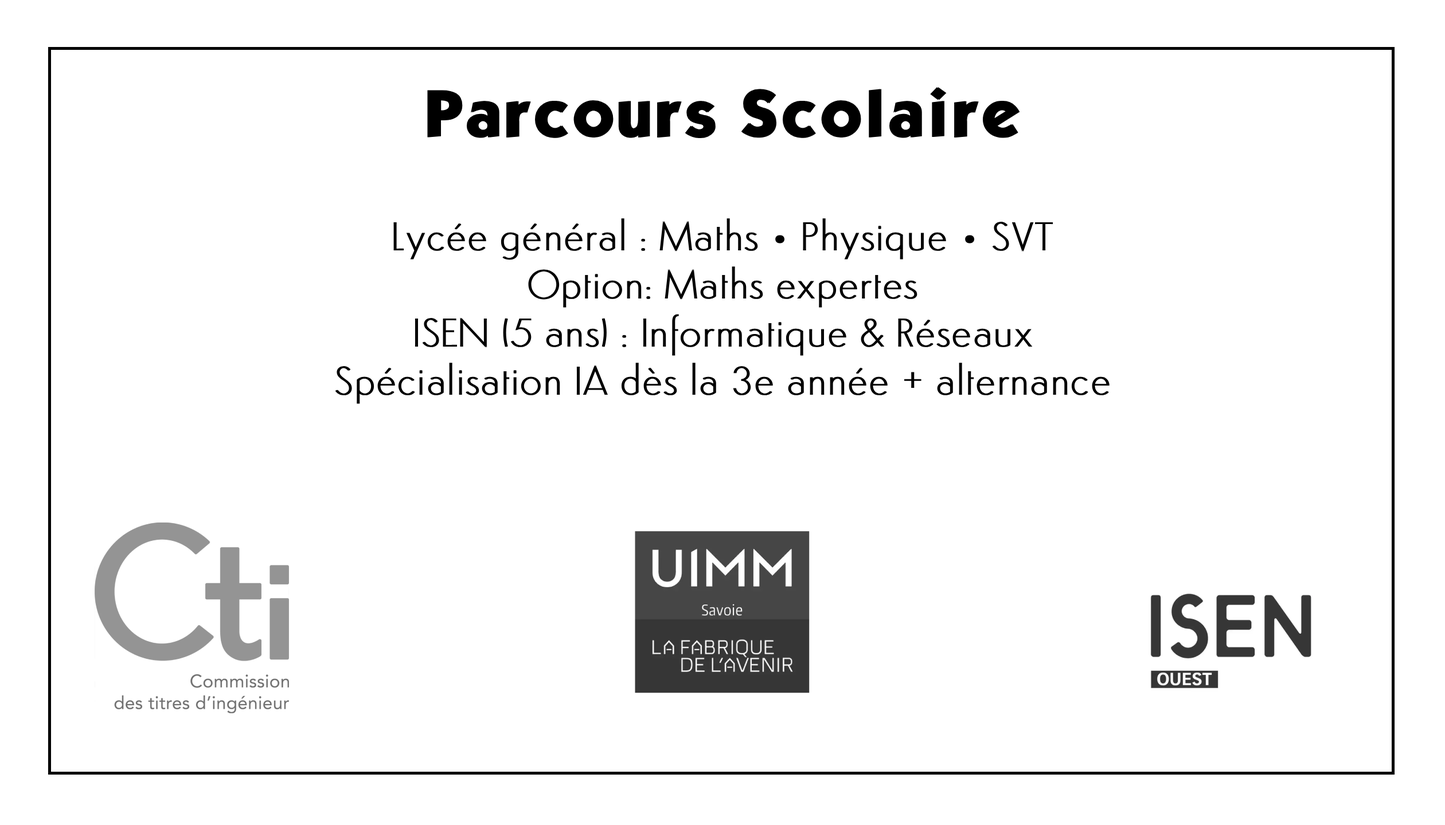
<style>
.page{position:relative;width:1445px;height:825px;background:#ffffff}
.page>*{position:absolute;margin:0}
.t1{font:57.3px "KabelBdNormal";color:#000000;font-weight:bold}
.t2{font:40.1px "Semplicita-Light";color:#000000;font-weight:bold}
</style>
<div class="page">
<p class="t1" style="left:427px;top:87px;width:593px;height:52px">Parcours Scolaire</p>
<p class="t2" style="left:335px;top:218px;width:774px;height:186px;text-align:center">Lycée général : Maths • Physique • SVT<br>Option: Maths expertes<br>ISEN (5 ans) : Informatique &amp; Réseaux<br>Spécialisation IA dès la 3e année + alternance</p>
</div>
